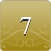
<style>
.page{position:relative;width:51px;height:51px}
.page>*{position:absolute;margin:0}
.t1{font:24.9px "TimesNewRomanPSMT";color:#ffffff}
</style>
<div class="page">
<p class="t1" style="left:20px;top:17px;width:11px;height:17px">7</p>
</div>
